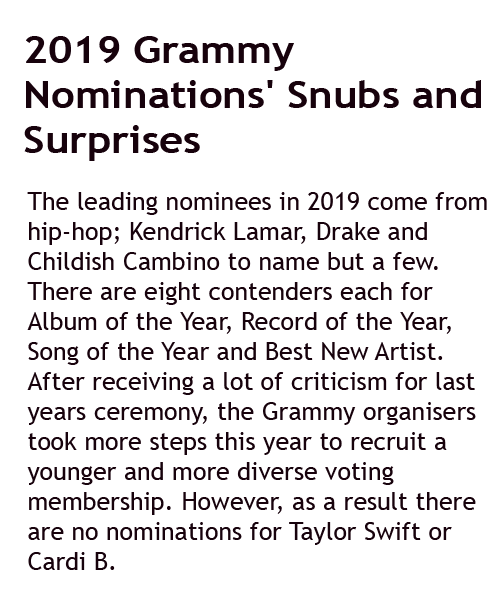
<style>
.page{position:relative;width:500px;height:600px;background:#ffffff}
.page>*{position:absolute;margin:0}
.t1{font:37.5px "TrebuchetMS-Bold";color:#17020c;scale:1.11 1}
.t2{font:25px "TrebuchetMS";color:#17020c}
</style>
<div class="page">
<p class="t1" style="left:24px;top:36px;width:457px;height:125px">2019 Grammy <br>Nominations' Snubs and <br>Surprises</p>
<p class="t2" style="left:27px;top:192px;width:460px;height:378px">The leading nominees in 2019 come from <br>hip-hop; Kendrick Lamar, Drake and <br>Childish Cambino to name but a few. <br>There are eight contenders each for <br>Album of the Year, Record of the Year, <br>Song of the Year and Best New Artist. <br>After receiving a lot of criticism for last <br>years ceremony, the Grammy organisers <br>took more steps this year to recruit a <br>younger and more diverse voting <br>membership. However, as a result there <br>are no nominations for Taylor Swift or <br>Cardi B.</p>
</div>
